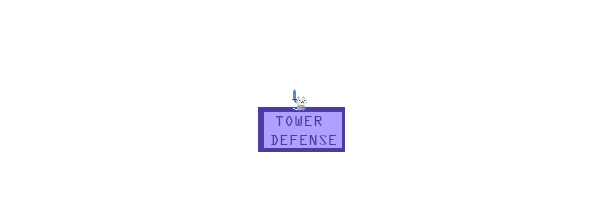
<style>
.page{position:relative;width:600px;height:200px;background:#ffffff}
.page>*{position:absolute;margin:0}
.t1{font:16px "OCRAExtended";color:#4c3ca2}
</style>
<div class="page">
<p class="t1" style="left:271px;top:116px;width:65px;height:29px;text-align:center">TOWER <br>DEFENSE</p>
</div>
